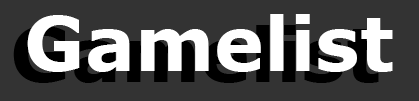
<style>
.page{position:relative;width:419px;height:101px;background:#333333}
.page>*{position:absolute;margin:0}
.t1{font:75px "Verdana-Bold";color:#ffffff}
</style>
<div class="page">
<p class="t1" style="left:27px;top:14px;width:366px;height:58px">Gamelist</p>
</div>
